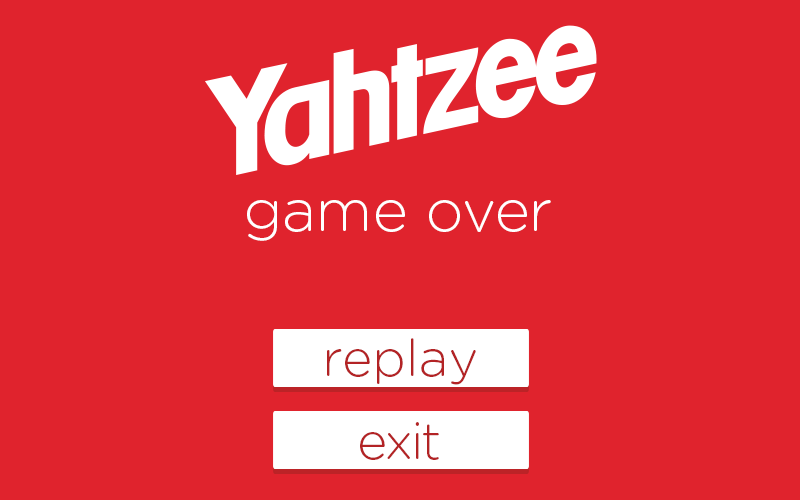
<style>
.page{position:relative;width:800px;height:500px;background:#e0232d}
.page>*{position:absolute;margin:0}
.t1{font:59.6px "GothamRounded-Light";color:#ffffff}
.t2{font:51.2px "GothamRounded-Light";color:#b32325}
.t3{font:51.2px "GothamRounded-Light";letter-spacing:-0.05em;color:#b32325}
</style>
<div class="page">
<p class="t1" style="left:247px;top:200px;width:304px;height:41px">game over</p>
<p class="t2" style="left:327px;top:338px;width:149px;height:47px">replay</p>
<p class="t3" style="left:360px;top:422px;width:79px;height:38px">exit</p>
</div>
